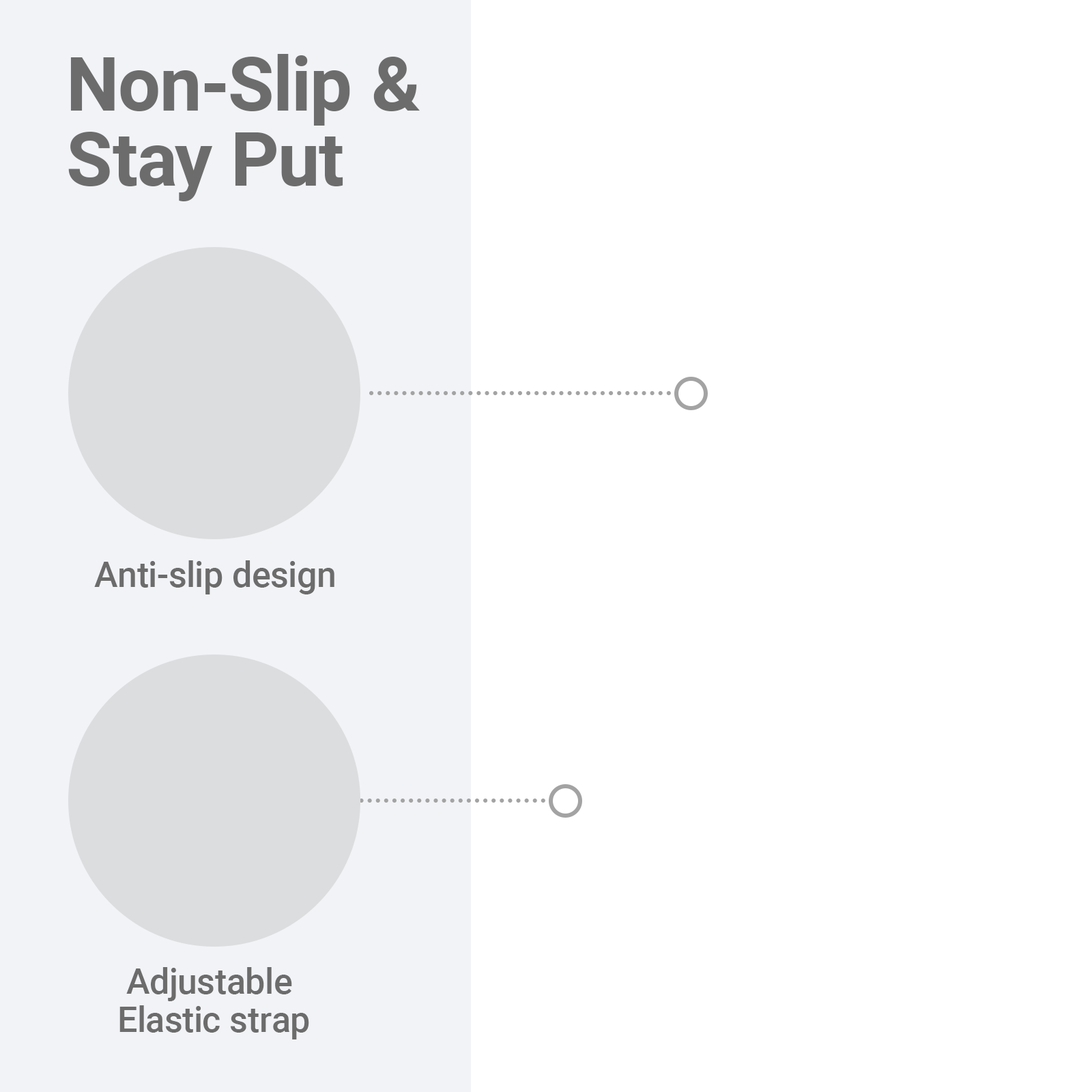
<style>
.page{position:relative;width:1092px;height:1092px;background:#ffffff}
.page>*{position:absolute;margin:0}
.t1{font:75.1px/75.1px "Roboto-Bold";color:#6c6c6c}
.t2{font:35.5px "Roboto-Medium";color:#6c6c6c}
.t3{font:35.5px/38.2px "Roboto-Medium";color:#6c6c6c}
</style>
<div class="page">
<p class="t1" style="left:68px;top:54px;width:352px;height:147px">Non-Slip &amp;<br>Stay Put</p>
<p class="t2" style="left:94px;top:560px;width:240px;height:34px">Anti-slip design</p>
<p class="t3" style="left:119px;top:967px;width:190px;height:72px;text-align:center">Adjustable <br>Elastic strap</p>
</div>
